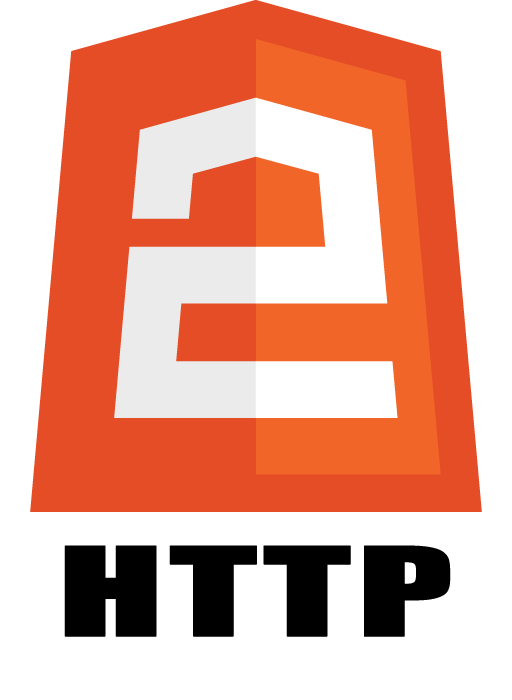
<style>
.page{position:relative;width:512px;height:700px;background:#ffffff}
.page>*{position:absolute;margin:0}
.t1{font:114px "Impact";color:#000000;font-weight:bold;scale:1.68 1}
</style>
<div class="page">
<p class="t1" style="left:64px;top:545px;width:387px;height:92px">HTTP</p>
</div>
